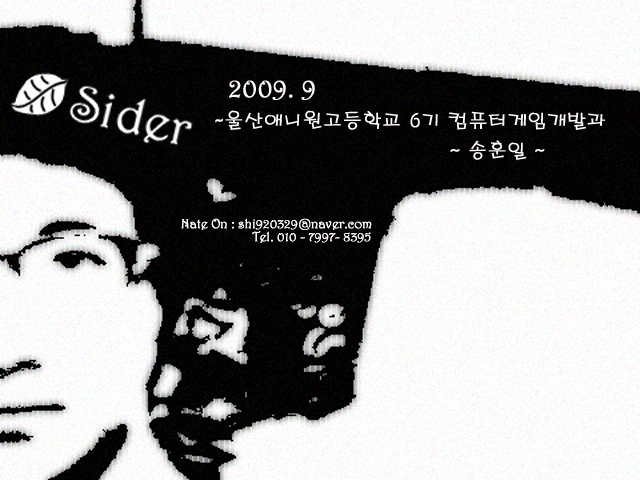
<style>
.page{position:relative;width:640px;height:480px}
.page>*{position:absolute;margin:0}
.t1{font:19.2px/30px "H2porL";color:#fffafa;font-weight:bold}
.t2{font:26.4px/30px "Harrington";color:#fffafa;font-weight:bold}
.t3{font:12.9px "Harrington";color:#fffafa;font-weight:bold}
</style>
<div class="page">
<p class="t1" style="left:215px;top:80px;width:390px;height:80px"><span class="t2">  2009. 9<br>-</span>울산애니원고등학교 6기 컴퓨터게임개발과<br>                                  ~ 송훈일 ~</p>
<p class="t3" style="left:181px;top:218px;width:191px;height:25px">Nate On : shi920329@naver.com<br>                    Tel. 010 - 7997- 8395</p>
</div>
